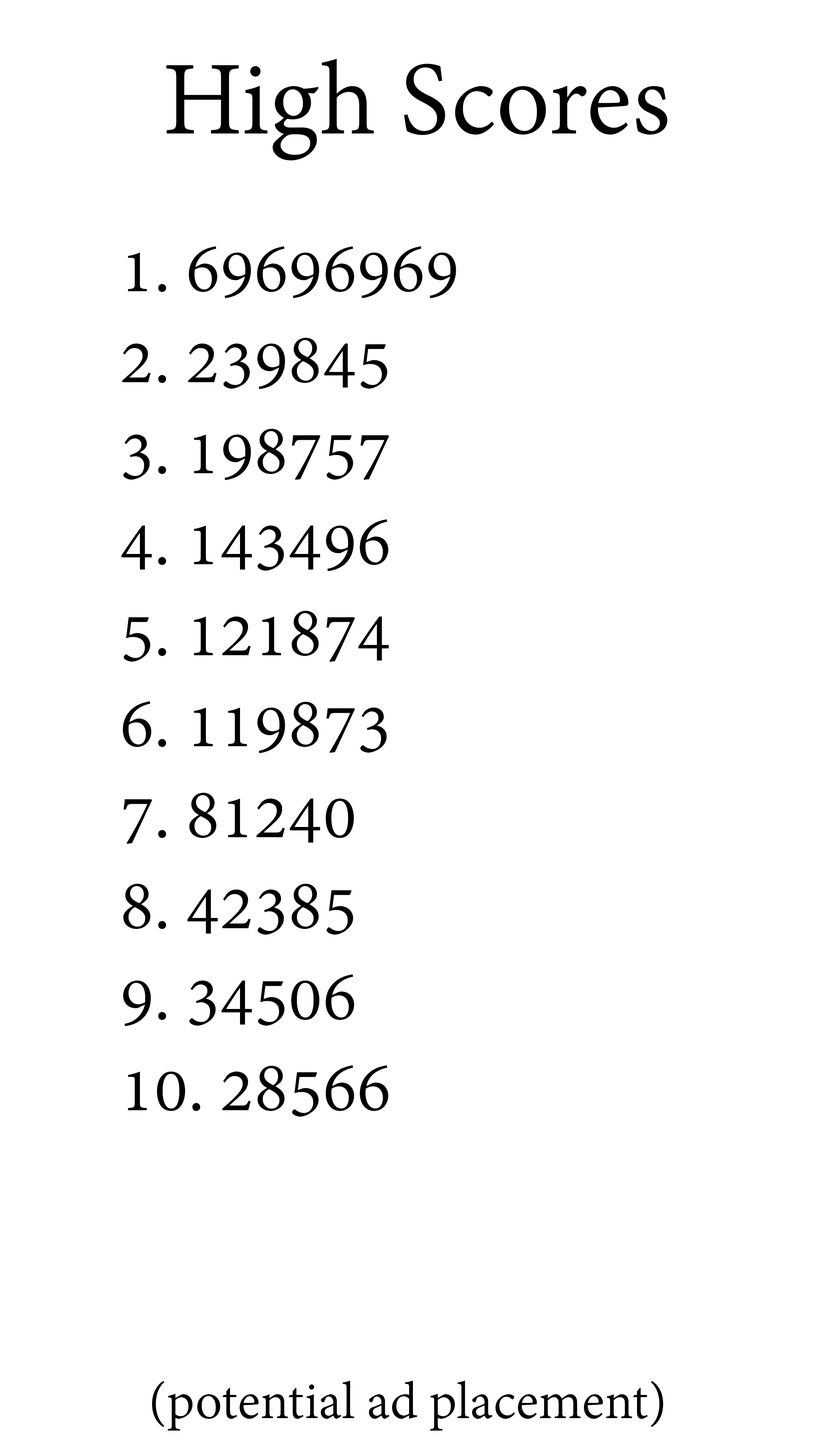
<style>
.page{position:relative;width:819px;height:1456px;background:#ffffff}
.page>*{position:absolute;margin:0}
.t1{font:113.7px "AdobeDevanagari-Regular";color:#000000}
.t2{font:75.8px "AdobeDevanagari-Regular";color:#000000}
.t3{font:56.9px "AdobeDevanagari-Regular";color:#000000}
</style>
<div class="page">
<p class="t1" style="left:166px;top:59px;width:501px;height:101px">High Scores</p>
<p class="t2" style="left:121px;top:246px;width:335px;height:871px">1. 69696969<br>2. 239845<br>3. 198757<br>4. 143496<br>5. 121874<br>6. 119873<br>7. 81240<br>8. 42385<br>9. 34506<br>10. 28566</p>
<p class="t3" style="left:152px;top:1381px;width:511px;height:50px">(potential ad placement)</p>
</div>
